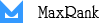
<style>
.page{position:relative;width:105px;height:24px;background:#ffffff}
.page>*{position:absolute;margin:0}
.t1{font:18px "Ducmy";color:#000000}
</style>
<div class="page">
<p class="t1" style="left:38px;top:5px;width:61px;height:13px">MaxRank</p>
</div>
